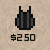
<style>
.page{position:relative;width:50px;height:50px}
.page>*{position:absolute;margin:0}
.t1{font:9px "OCRAStd";color:#121109}
</style>
<div class="page">
<p class="t1" style="left:10px;top:34px;width:26px;height:7px">$250</p>
</div>
